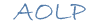
<style>
.page{position:relative;width:100px;height:23px;background:#ffffff}
.page>*{position:absolute;margin:0}
.t1{font:28px "BradleyHandITC";color:#4e78a8}
</style>
<div class="page">
<p class="t1" style="left:13px;top:3px;width:73px;height:18px">AOLP</p>
</div>
